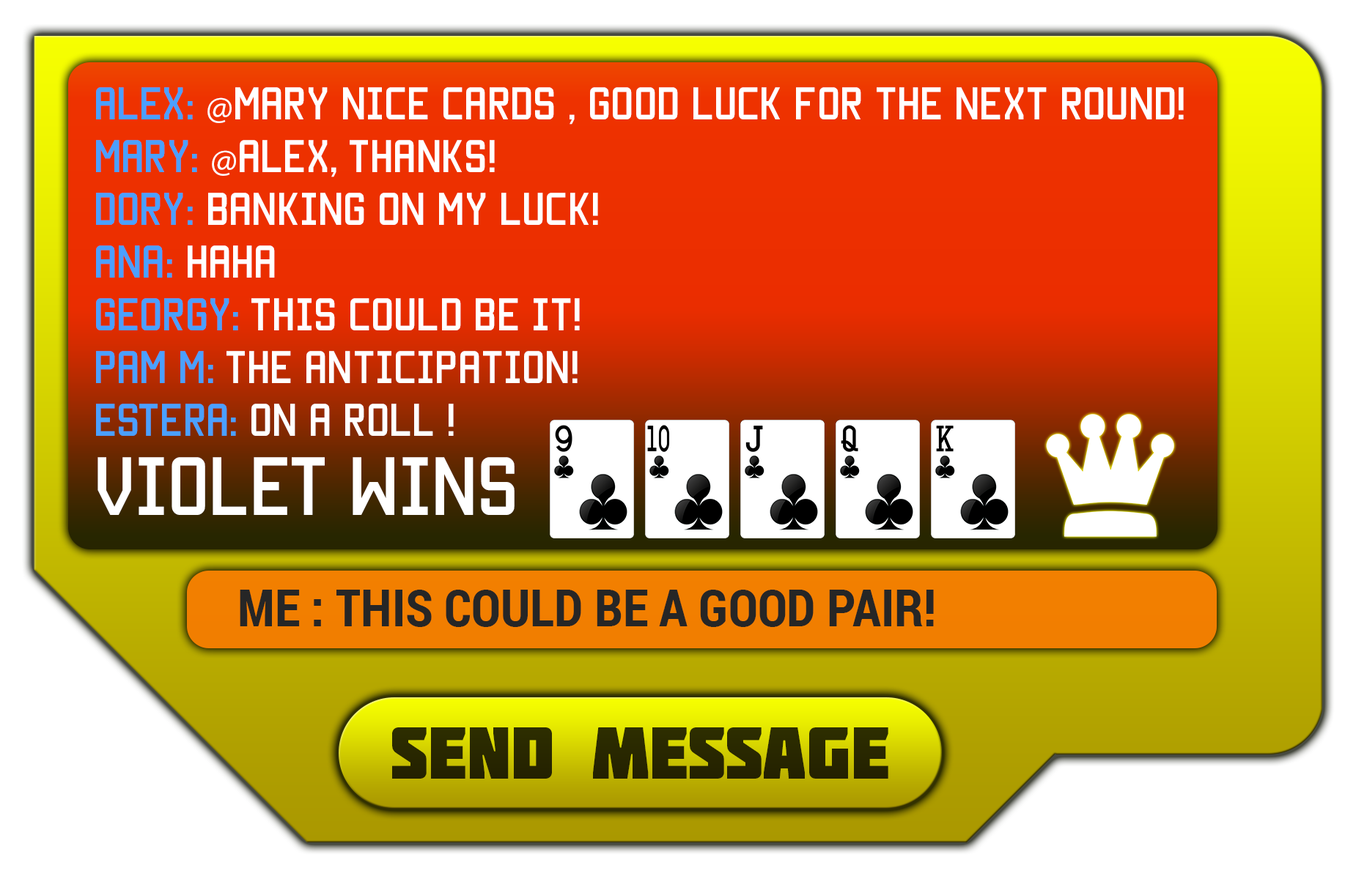
<style>
.page{position:relative;width:1356px;height:879px}
.page>*{position:absolute;margin:0}
.t1{font:36.6px/26.4px "Manteka";color:#ffffff}
.t2{font:36.6px/26.4px "Manteka";color:#4ba0ff}
.t3{font:36.6px/26.4px "MyriadPro-Regular";color:#ffffff}
.t4{font:66px/26.4px "Manteka";color:#ffffff}
.t5{font:51.3px "RobotoCondensed-Bold";color:#262626}
.t6{font:73.3px "Molot";color:#292700}
</style>
<div class="page">
<p class="t1" style="left:96px;top:87px;width:1088px;height:428px"><span class="t2">ALEX: </span><span class="t3">@</span>MARY Nice Cards , GOOD LUCK for the next round!<br><br><span class="t2">MARY: </span><span class="t3">@</span>ALEX, THANKS!<br><br><span class="t2">DORY:</span> BANKING ON MY LUCK!<br><br><span class="t2">ANA:</span> HaHa<br><br><span class="t2">GEORGY:</span> This could be it!<br><br><span class="t2">PAM M:</span> The anticipation!<br><br><span class="t2">ESTERA:</span> On a roll !<br><br><br><span class="t4">VIOLET WINS</span></p>
<p class="t5" style="left:240px;top:590px;width:694px;height:37px">ME : THIS COULD BE A GOOD PAIR!</p>
<p class="t6" style="left:392px;top:728px;width:496px;height:51px">SEND message</p>
</div>
